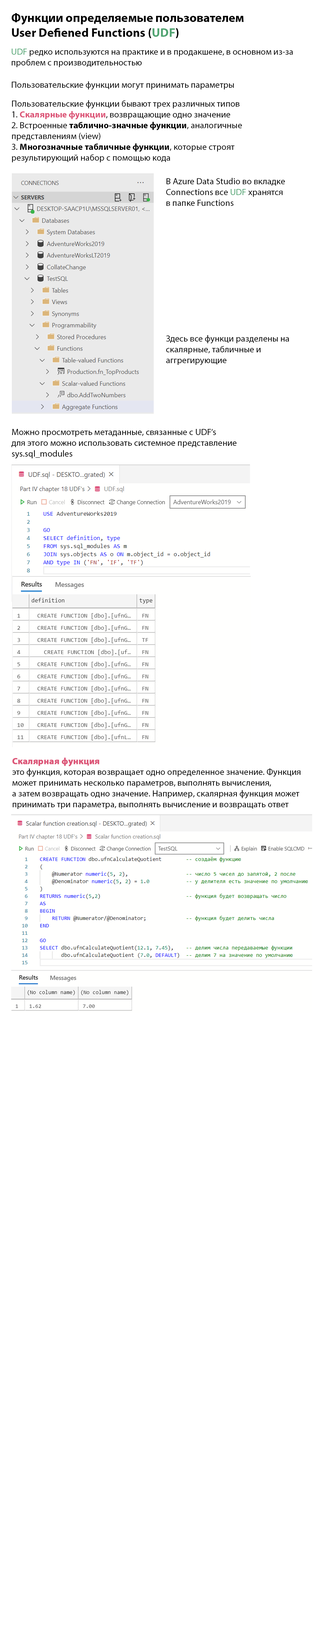
<style>
.page{position:relative;width:326px;height:1627px;background:#ffffff}
.page>*{position:absolute;margin:0}
.t1{font:12.4px "MyriadPro-Bold";color:#000000}
.t2{font:12.4px "MyriadPro-Bold";color:#51a472}
.t3{font:9px "MyriadPro-Regular";color:#000000}
.t4{font:9px "MyriadPro-Regular";color:#51a472}
.t5{font:9px "MyriadPro-Bold";color:#dc5678}
.t6{font:9px "MyriadPro-Bold";color:#000000}
.t7{font:9px "MyriadPro-Bold";color:#dc5678;font-weight:bold}
</style>
<div class="page">
<p class="t1" style="left:11px;top:13px;width:232px;height:25px">Функции определяемые пользователем<br>User Defiened Functions (<span class="t2">UDF</span>)</p>
<p class="t3" style="left:11px;top:49px;width:282px;height:18px"><span class="t4">UDF </span>редко используются на практике и в продакшене, в основном из-за<br>проблем с производительностью</p>
<p class="t3" style="left:12px;top:81px;width:222px;height:9px">Пользовательские функции могут принимать параметры</p>
<p class="t3" style="left:11px;top:100px;width:231px;height:63px">Пользовательские функции бывают трех различных типов<br>1. <span class="t5">Скалярные функции</span>, возвращающие одно значение<br>2. Встроенные <span class="t6">таблично-значные функции</span>, аналогичные <br>представлениям (view)<br>3. <span class="t6">Многозначные табличные функции</span>, которые строят <br>результирующий набор с помощью кода</p>
<p class="t3" style="left:166px;top:178px;width:119px;height:28px">В Azure Data Studio во вкладке <br>Connections все <span class="t4">UDF </span>хранятся<br>в папке Functions</p>
<p class="t3" style="left:166px;top:335px;width:123px;height:30px">Здесь все функци разделены на <br>скалярные, табличные и <br>аггрегирующие</p>
<p class="t3" style="left:11px;top:429px;width:225px;height:30px">Можно просмотреть метаданные, связанные с UDF’s <br>для этого можно использовать системное представление <br>sys.sql_modules</p>
<p class="t3" style="left:12px;top:758px;width:288px;height:51px"><span class="t7">Скалярная функция</span><br>это функция, которая возвращает одно определенное значение. Функция <br>может принимать несколько параметров, выполнять вычисления,<br>а затем возвращать одно значение. Например, скалярная функция может <br>принимать три параметра, выполнять вычисление и возвращать ответ</p>
</div>
